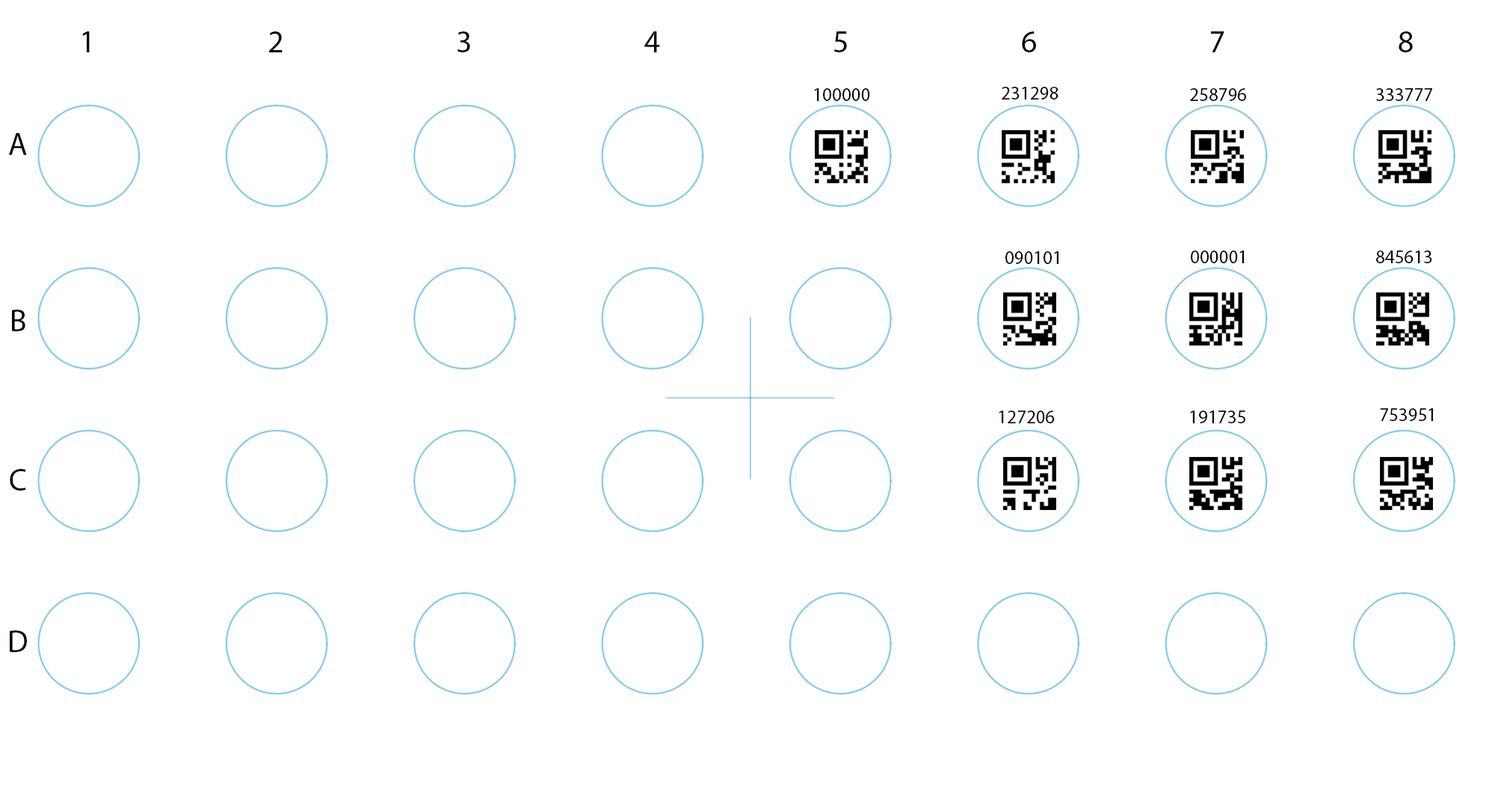
<style>
.page{position:relative;width:1501px;height:795px;background:#ffffff}
.page>*{position:absolute;margin:0}
.t1{font:31.1px "MyriadPro-Regular";color:#000000}
.t2{font:18.7px "MyriadPro-Regular";color:#000000}
</style>
<div class="page">
<p class="t1" style="left:82px;top:31px;width:1331px;height:21px">1       2       3       4       5       6       7       8</p>
<p class="t2" style="left:814px;top:88px;width:56px;height:13px">100000</p>
<p class="t2" style="left:1002px;top:87px;width:56px;height:12px">231298</p>
<p class="t2" style="left:1190px;top:88px;width:56px;height:13px">258796</p>
<p class="t2" style="left:1376px;top:88px;width:56px;height:13px">333777</p>
<p class="t1" style="left:9px;top:133px;width:18px;height:519px">A                      B             C          D</p>
<p class="t2" style="left:1005px;top:251px;width:53px;height:13px">090101</p>
<p class="t2" style="left:1191px;top:250px;width:53px;height:13px">000001</p>
<p class="t2" style="left:1376px;top:250px;width:56px;height:13px">845613</p>
<p class="t2" style="left:999px;top:410px;width:56px;height:13px">127206</p>
<p class="t2" style="left:1190px;top:410px;width:55px;height:13px">191735</p>
<p class="t2" style="left:1380px;top:408px;width:53px;height:13px">753951</p>
</div>
